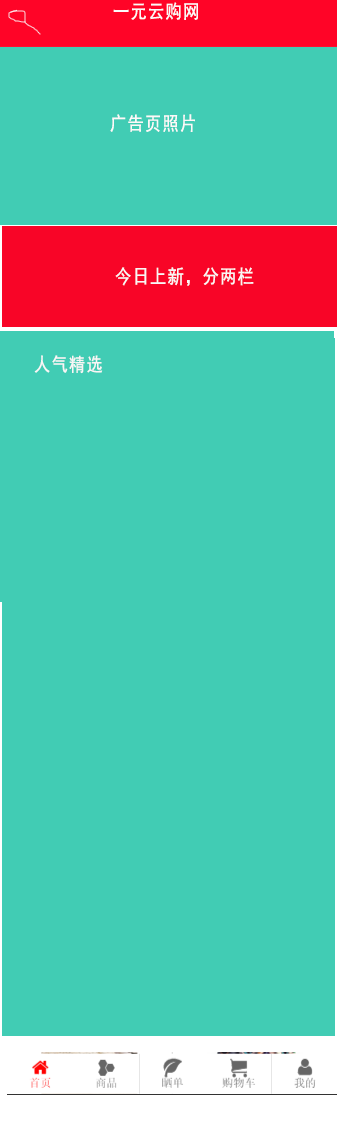
<style>
.page{position:relative;width:337px;height:1134px;background:#41ccb4}
.page>*{position:absolute;margin:0}
.t1{font:19px "SimHei";letter-spacing:0.08em;color:#fcf9f9;scale:0.85 1}
.t2{font:19px "SimHei";letter-spacing:0.08em;color:#f9f6f6;scale:0.85 1}
</style>
<div class="page">
<p class="t1" style="left:113px;top:2px;width:85px;height:18px">一元云购网</p>
<p class="t1" style="left:110px;top:114px;width:85px;height:18px">广告页照片</p>
<p class="t2" style="left:115px;top:267px;width:139px;height:19px">今日上新，分两栏</p>
<p class="t2" style="left:34px;top:355px;width:69px;height:19px">人气精选</p>
</div>
